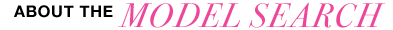
<style>
.page{position:relative;width:393px;height:30px;background:#ffffff}
.page>*{position:absolute;margin:0}
.t1{font:16px "HelveticaNeue-Bold";letter-spacing:0.05em;color:#000000}
.t2{font:34px "BodoniSvtyTwoOSITCTTBookIt";letter-spacing:0.05em;color:#ee4799}
</style>
<div class="page">
<p class="t1" style="left:14px;top:5px;width:99px;height:13px">ABOUT THE</p>
<p class="t2" style="left:118px;top:2px;width:268px;height:26px">MODEL SEARCH</p>
</div>
